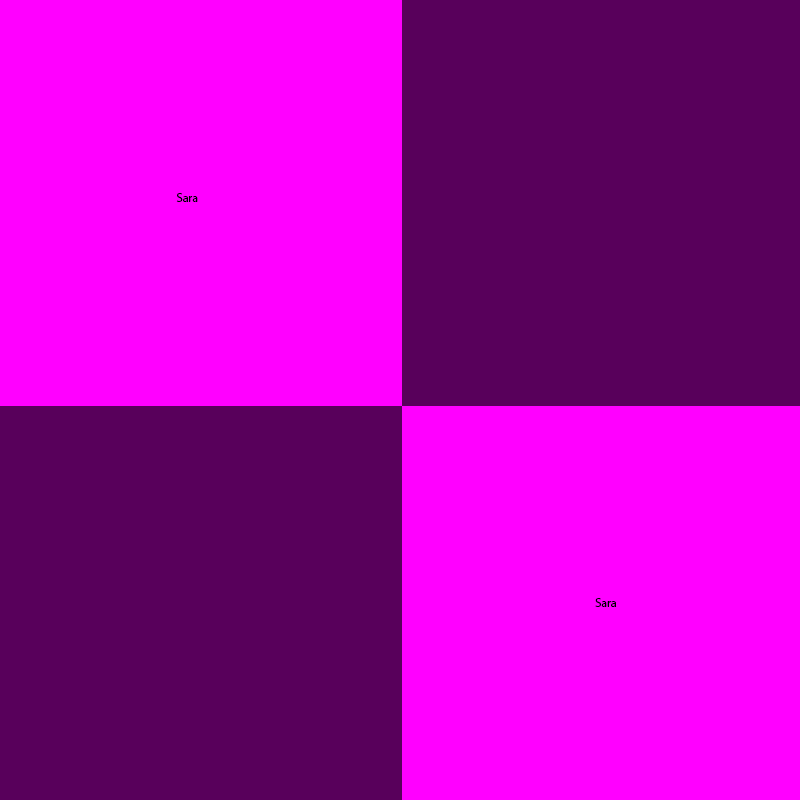
<style>
.page{position:relative;width:800px;height:800px;background:#58005b}
.page>*{position:absolute;margin:0}
.t1{font:12px "MyriadPro-Regular";color:#000000}
</style>
<div class="page">
<p class="t1" style="left:176px;top:193px;width:22px;height:9px">Sara</p>
<p class="t1" style="left:595px;top:598px;width:22px;height:9px">Sara</p>
</div>
